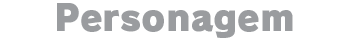
<style>
.page{position:relative;width:350px;height:40px;background:#ffffff}
.page>*{position:absolute;margin:0}
.t1{font:36px "RodinPro-UB";letter-spacing:-0.002em;color:#9a9c9f}
</style>
<div class="page">
<p class="t1" style="left:57px;top:3px;width:236px;height:35px">Personagem</p>
</div>
